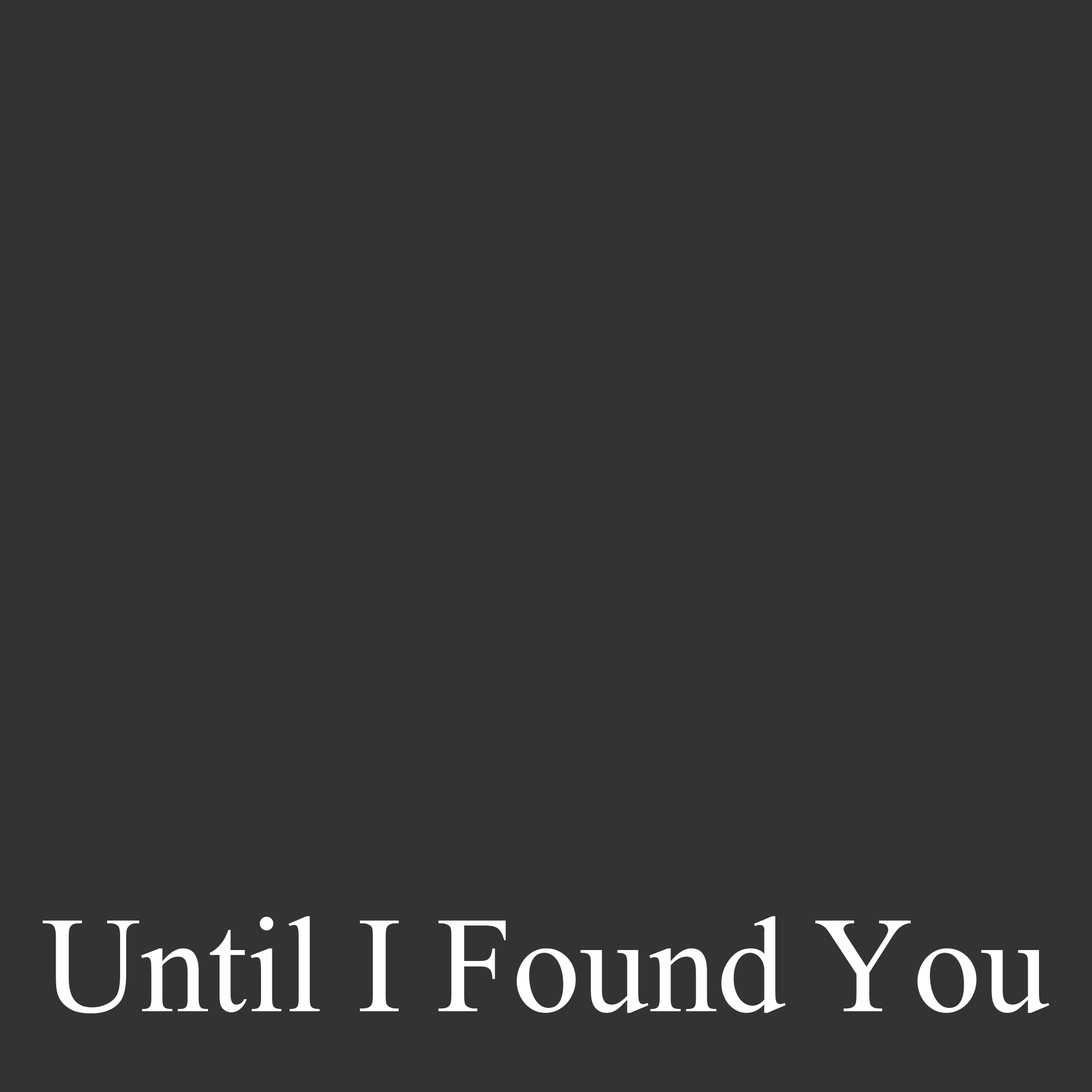
<style>
.page{position:relative;width:1092px;height:1092px;background:#333333}
.page>*{position:absolute;margin:0}
.t1{font:136.5px "MongolianBaiti";color:#ffffff}
</style>
<div class="page">
<p class="t1" style="left:43px;top:916px;width:1006px;height:97px">Until I Found You</p>
</div>
